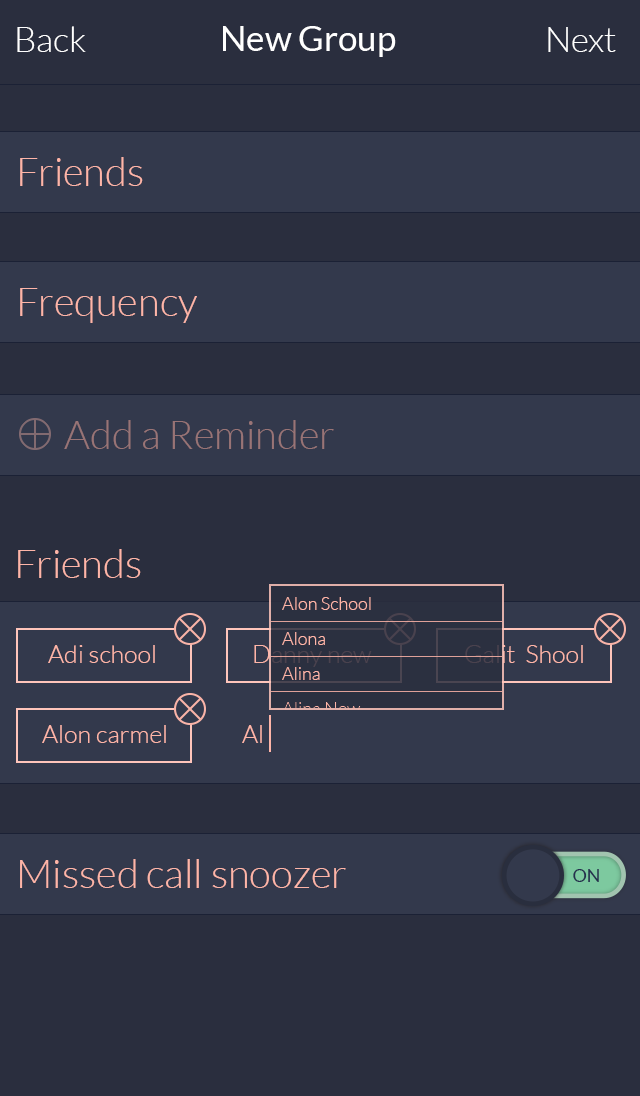
<style>
.page{position:relative;width:640px;height:1096px;background:#2a2e3e}
.page>*{position:absolute;margin:0}
.t1{font:35px "Lato-Light";color:#ffffff}
.t2{font:35px "Lato-Regular";color:#ffffff}
.t3{font:40px "Lato-Light";color:#feb5a8}
.t4{font:40px "Lato-Light";color:#997476}
.t5{font:18px "Lato-Light";color:#feb5a8}
.t6{font:25px "Lato-Light";color:#feb5a8}
.t7{font:25px "Lato-Light"}
.t8{font:18px "Lato-Light"}
.t9{font:18px "Lato-Regular";color:#252f4e}
</style>
<div class="page">
<p class="t1" style="left:17px;top:26px;width:69px;height:26px">Back</p>
<p class="t2" style="left:223px;top:26px;width:173px;height:31px">New Group</p>
<p class="t1" style="left:548px;top:27px;width:68px;height:25px">Next</p>
<p class="t3" style="left:20px;top:157px;width:123px;height:29px">Friends</p>
<p class="t3" style="left:20px;top:288px;width:177px;height:35px">Frequency</p>
<p class="t4" style="left:64px;top:420px;width:270px;height:29px">Add a Reminder</p>
<p class="t3" style="left:18px;top:549px;width:123px;height:29px">Friends</p>
<p class="t5" style="left:282px;top:597px;width:89px;height:13px">Alon School</p>
<p class="t5" style="left:282px;top:632px;width:43px;height:13px">Alona</p>
<p class="t6" style="left:48px;top:645px;width:107px;height:18px">Adi school</p>
<p class="t7" style="left:254px;top:645px;width:118px;height:22px">Danny new</p>
<p class="t7" style="left:465px;top:645px;width:118px;height:18px">Galit  Shool</p>
<p class="t5" style="left:282px;top:667px;width:38px;height:13px">Alina</p>
<p class="t8" style="left:282px;top:702px;width:79px;height:13px">Alina New</p>
<p class="t6" style="left:42px;top:725px;width:124px;height:18px">Alon carmel</p>
<p class="t6" style="left:242px;top:725px;width:20px;height:18px">Al</p>
<p class="t3" style="left:20px;top:859px;width:326px;height:29px">Missed call snoozer</p>
<p class="t9" style="left:573px;top:869px;width:26px;height:13px">ON</p>
</div>
